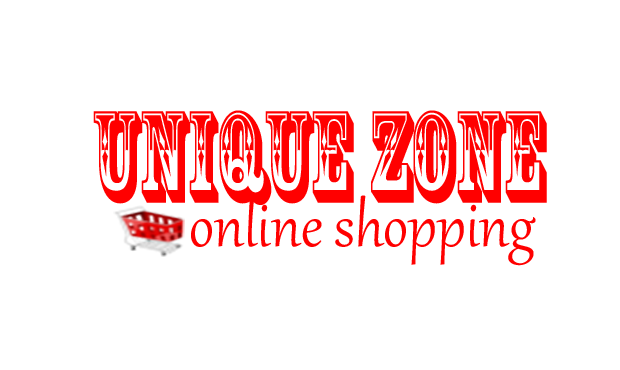
<style>
.page{position:relative;width:620px;height:370px;background:#ffffff}
.page>*{position:absolute;margin:0}
.t1{font:121.5px "RosewoodStd-Regular";color:#ff0000;scale:0.67 1}
.t2{font:76.3px "Gabriola";color:#ff0000;scale:0.91 1}
</style>
<div class="page">
<p class="t1" style="left:93px;top:110px;width:454px;height:95px">Unique zone</p>
<p class="t2" style="left:191px;top:195px;width:345px;height:71px">online shopping</p>
</div>
